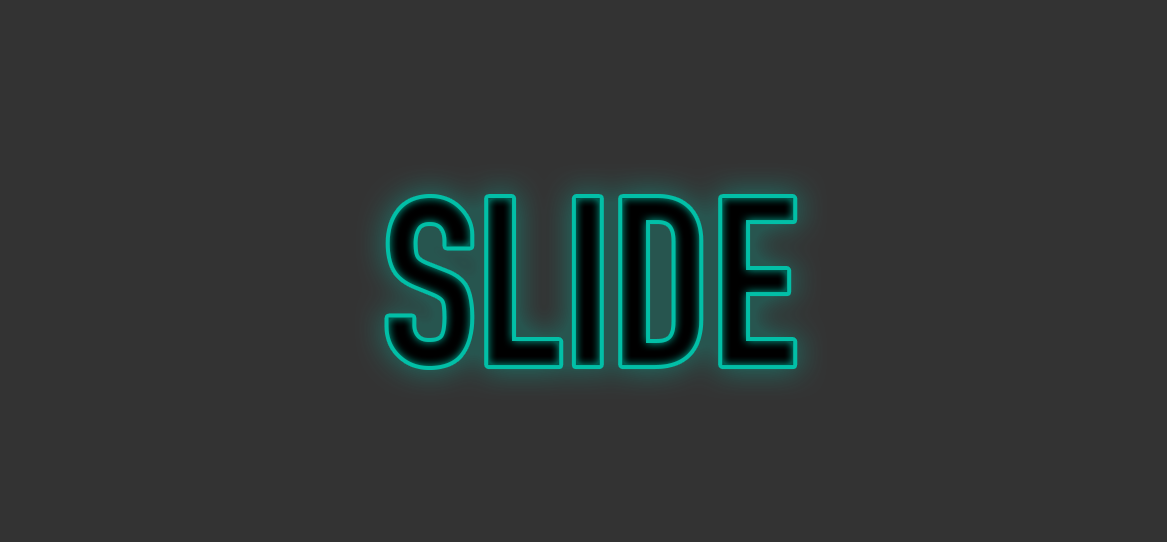
<style>
.page{position:relative;width:1167px;height:542px;background:#333333}
.page>*{position:absolute;margin:0}
.t1{font:233.7px "DINEngschrift";text-transform:uppercase}
</style>
<div class="page">
<p class="t1" style="left:388px;top:198px;width:406px;height:168px">slide</p>
</div>
